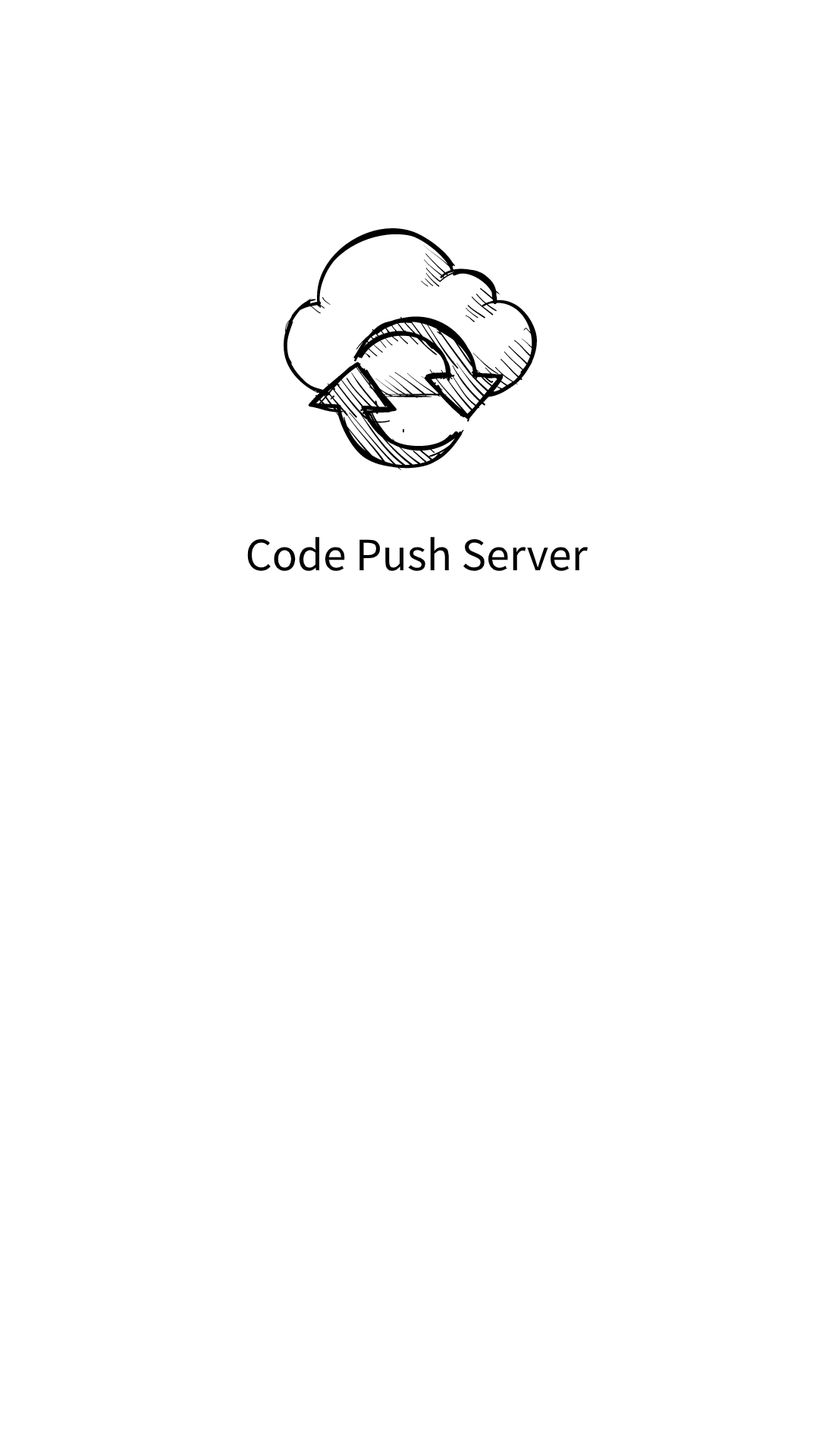
<style>
.page{position:relative;width:819px;height:1456px;background:#ffffff}
.page>*{position:absolute;margin:0}
.t1{font:41.7px "SourceHanSansSC-Regular";color:#000000}
</style>
<div class="page">
<p class="t1" style="left:247px;top:537px;width:341px;height:34px">Code Push Server</p>
</div>
